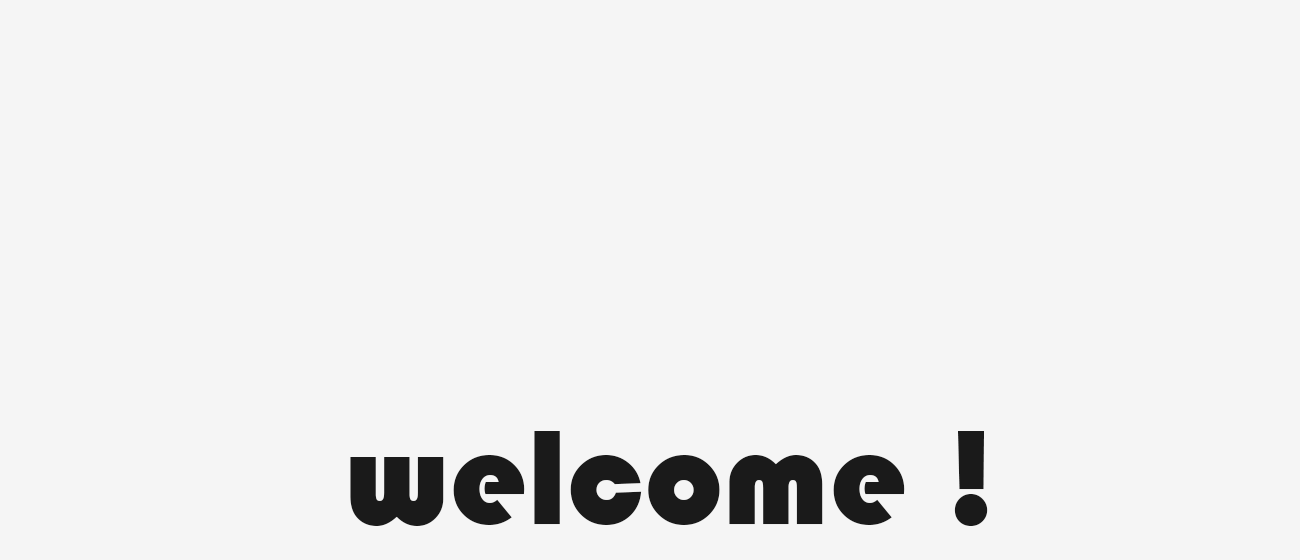
<style>
.page{position:relative;width:1300px;height:560px;background:#f5f5f5}
.page>*{position:absolute;margin:0}
.t1{font:138.7px "Bauhaus93";color:#1a1a1a}
</style>
<div class="page">
<p class="t1" style="left:350px;top:431px;width:638px;height:95px">welcome !</p>
</div>
